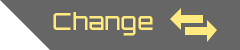
<style>
.page{position:relative;width:240px;height:50px;background:#666666}
.page>*{position:absolute;margin:0}
.t1{font:24px "Orbitron-Medium";color:#ffea80}
</style>
<div class="page">
<p class="t1" style="left:53px;top:12px;width:100px;height:24px">Change</p>
</div>
